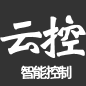
<style>
.page{position:relative;width:86px;height:86px;background:#333333}
.page>*{position:absolute;margin:0}
.t1{font:50px "WeibeiSC-Bold";letter-spacing:-0.2em;color:#ffffff;font-weight:bold}
.t2{font:15px "YuppySC-Regular";letter-spacing:-0.2em;color:#ffffff;font-weight:bold}
</style>
<div class="page">
<p class="t1" style="left:0px;top:15px;width:86px;height:43px">云控</p>
<p class="t2" style="left:21px;top:65px;width:51px;height:14px">智能控制</p>
</div>
